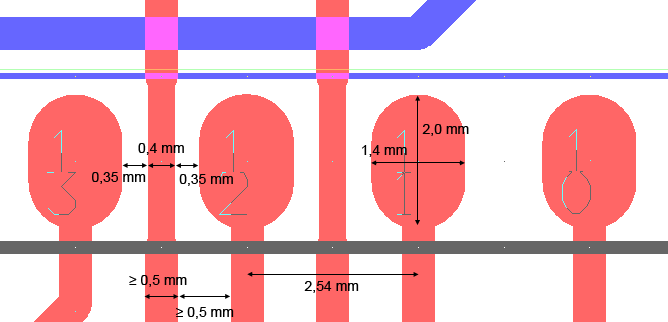
<style>
.page{position:relative;width:668px;height:322px;background:#ffffff}
.page>*{position:absolute;margin:0}
.t1{font:14px "ArialMT";color:#000000}
</style>
<div class="page">
<p class="t1" style="left:422px;top:124px;width:47px;height:12px">2,0 mm</p>
<p class="t1" style="left:138px;top:143px;width:46px;height:12px">0,4 mm</p>
<p class="t1" style="left:362px;top:145px;width:45px;height:12px">1,4 mm</p>
<p class="t1" style="left:92px;top:172px;width:54px;height:12px">0,35 mm</p>
<p class="t1" style="left:179px;top:174px;width:54px;height:12px">0,35 mm</p>
<p class="t1" style="left:129px;top:275px;width:58px;height:12px">≥ 0,5 mm</p>
<p class="t1" style="left:304px;top:281px;width:55px;height:12px">2,54 mm</p>
<p class="t1" style="left:176px;top:307px;width:58px;height:12px">≥ 0,5 mm</p>
</div>
